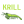
<style>
.page{position:relative;width:24px;height:24px;background:#ffffff}
.page>*{position:absolute;margin:0}
.t1{font:7.4px "AlwynNew-Bold";letter-spacing:-0.02em;color:#b9e34f}
</style>
<div class="page">
<p class="t1" style="left:3px;top:4px;width:18px;height:6px">KRILL</p>
</div>
